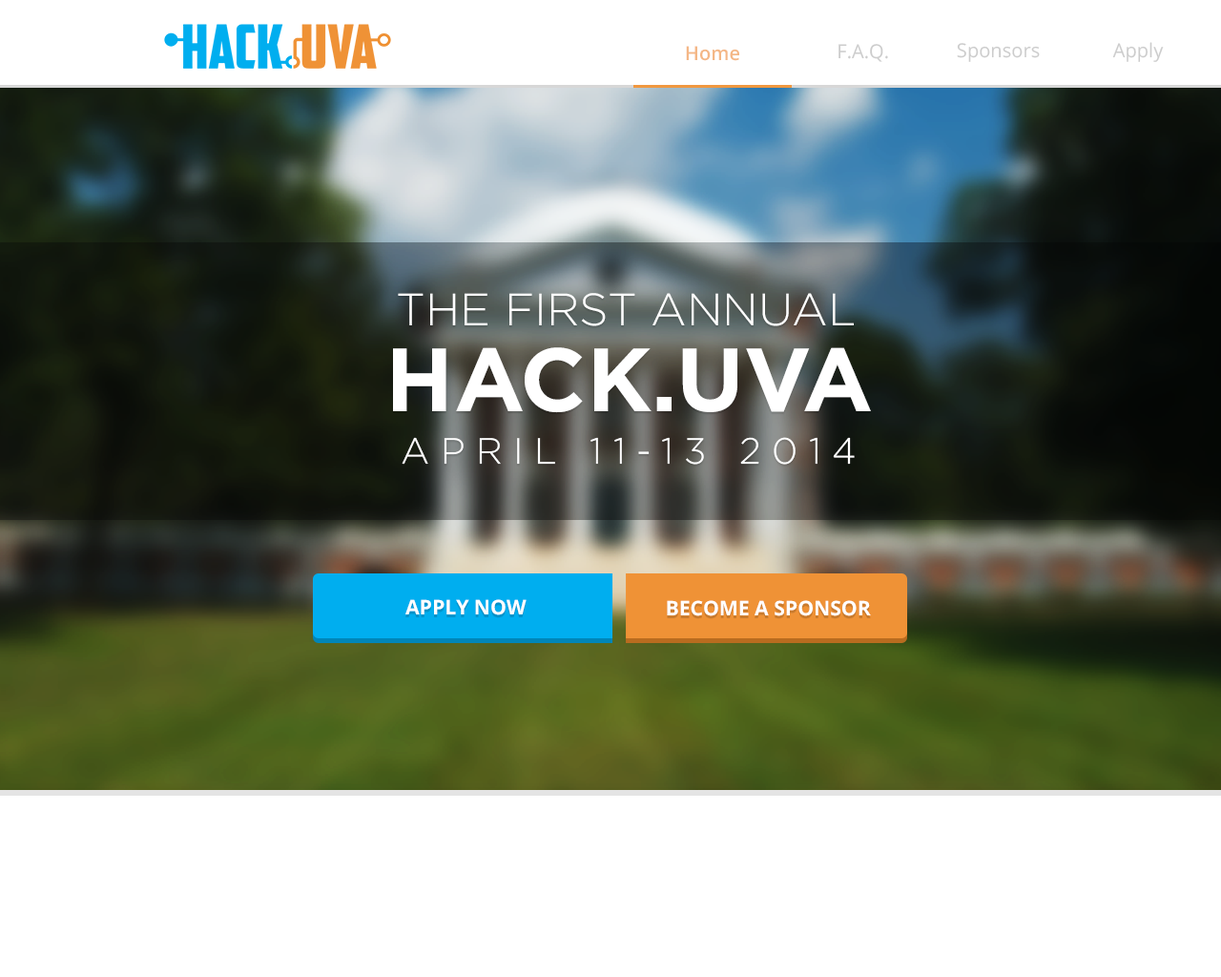
<style>
.page{position:relative;width:1221px;height:977px;background:#ffffff}
.page>*{position:absolute;margin:0}
.t1{font:19.3px "OpenSans";color:#b4b4b4}
.t2{font:19.3px "OpenSans-Semibold";color:#f4b786}
.t3{font:45.4px "Gotham-Light";color:#ffffff;text-transform:uppercase}
.t4{font:89.5px "Gotham-Bold";color:#ffffff;text-transform:uppercase}
.t5{font:36.5px "Gotham-Light";letter-spacing:0.3em;color:#ffffff;text-transform:uppercase}
.t6{font:20.2px "OpenSans-Bold";color:#ffffff;text-transform:uppercase}
</style>
<div class="page">
<p class="t1" style="left:1112px;top:42px;width:52px;height:20px;opacity:0.7">Apply</p>
<p class="t2" style="left:686px;top:46px;width:53px;height:15px">Home</p>
<p class="t1" style="left:838px;top:44px;width:50px;height:18px;opacity:0.7">F.A.Q.</p>
<p class="t1" style="left:957px;top:43px;width:83px;height:19px;opacity:0.7">Sponsors</p>
<p class="t3" style="left:398px;top:293px;width:456px;height:33px">The First Annual</p>
<p class="t4" style="left:393px;top:347px;width:478px;height:66px">Hack.uva</p>
<p class="t5" style="left:402px;top:437px;width:453px;height:28px">APRIL 11-13 2014</p>
<p class="t6" style="left:405px;top:599px;width:122px;height:16px">Apply Now</p>
<p class="t6" style="left:667px;top:600px;width:204px;height:16px">BECOME A SPONSOR</p>
</div>
